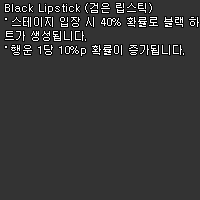
<style>
.page{position:relative;width:200px;height:200px;background:#333333}
.page>*{position:absolute;margin:0}
.t1{font:11px/14px "Dotum";color:#ffffff}
</style>
<div class="page">
<p class="t1" style="left:5px;top:3px;width:194px;height:53px">Black Lipstick (검은 립스틱)<br>˚ 스테이지 입장 시 40% 확률로 블랙 하<br>트가 생성됩니다.<br>˚ 행운 1당 10%p 확률이 증가됩니다.</p>
</div>
